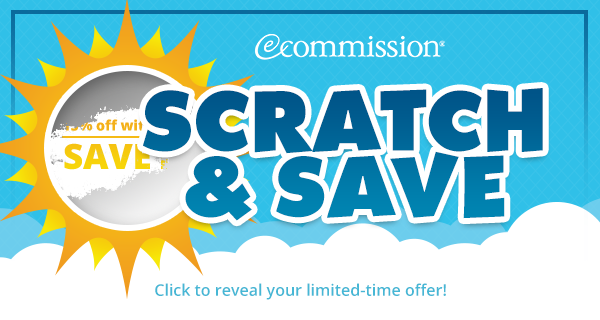
<style>
.page{position:relative;width:600px;height:320px;background:#ffffff}
.page>*{position:absolute;margin:0}
.t1{font:78.2px/65.8px "Walibi-Bold";color:#006798;text-transform:uppercase}
.t2{font:16px "OpenSans-Semibold";color:#46b7d5}
</style>
<div class="page">
<p class="t1" style="left:143px;top:88px;width:400px;height:133px;text-align:center">Scratch<br>&amp; Save</p>
<p class="t2" style="left:155px;top:283px;width:291px;height:17px">Click to reveal your limited-time offer!</p>
</div>
